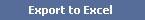
<style>
.page{position:relative;width:145px;height:20px;background:#566c99}
.page>*{position:absolute;margin:0}
.t1{font:11px "Tahoma-Bold";color:#ffffff}
</style>
<div class="page">
<p class="t1" style="left:29px;top:5px;width:83px;height:11px">Export to Excel</p>
</div>
